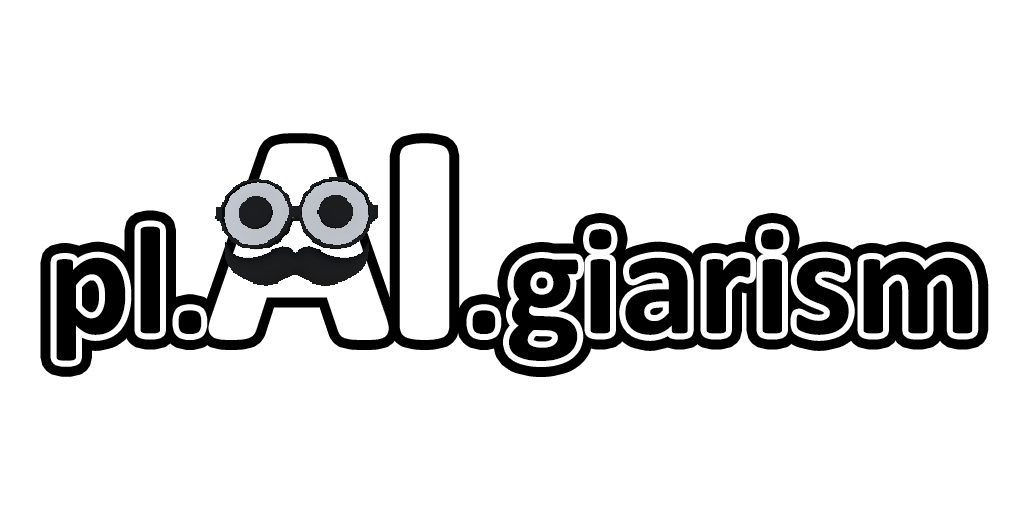
<style>
.page{position:relative;width:1024px;height:512px;background:#ffffff}
.page>*{position:absolute;margin:0}
.t1{font:156.6px "Calibri-Bold";color:#000000}
.t2{font:289.1px "Calibri-Bold";color:#ffffff}
</style>
<div class="page">
<p class="t1" style="left:56px;top:149px;width:917px;height:212px">pl.<span class="t2">AI</span>.giarism</p>
</div>
